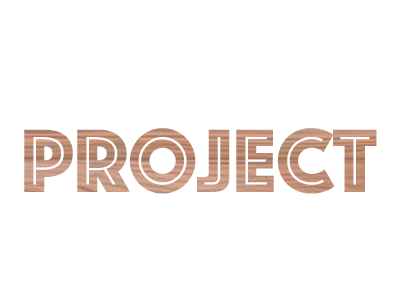
<style>
.page{position:relative;width:401px;height:307px;background:#ffffff}
.page>*{position:absolute;margin:0}
.t1{font:93.4px "Phosphate-Inline";color:#c09079}
</style>
<div class="page">
<p class="t1" style="left:24px;top:128px;width:353px;height:66px">project</p>
</div>
